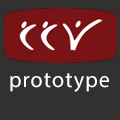
<style>
.page{position:relative;width:120px;height:120px;background:#32312f}
.page>*{position:absolute;margin:0}
.t1{font:22px "MyriadPro-Regular";letter-spacing:0.05em;color:#ffffff}
</style>
<div class="page">
<p class="t1" style="left:10px;top:73px;width:99px;height:19px">prototype</p>
</div>
